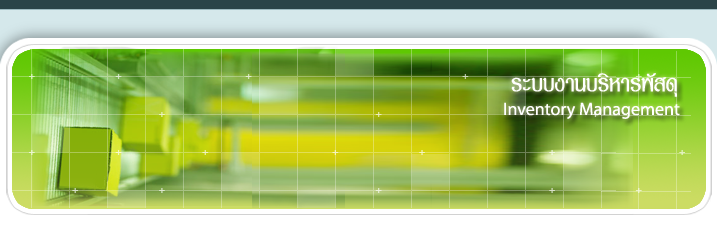
<style>
.page{position:relative;width:717px;height:230px}
.page>*{position:absolute;margin:0}
.t1{font:33px "PSLAsadong";color:#ffffff}
.t2{font:18px "MyriadPro-Regular";color:#ffffff}
</style>
<div class="page">
<p class="t1" style="left:511px;top:73px;width:166px;height:24px">ระบบงานบริหารพัสดุ</p>
<p class="t2" style="left:504px;top:102px;width:176px;height:17px">Inventory Management</p>
</div>
